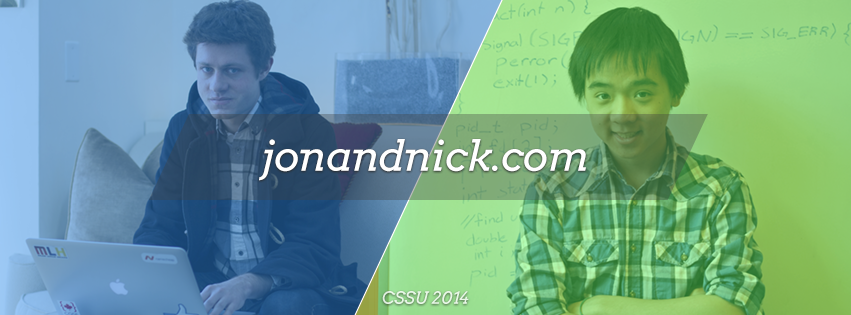
<style>
.page{position:relative;width:851px;height:315px}
.page>*{position:absolute;margin:0}
.t1{font:41.7px "Arvo-Italic";letter-spacing:-0.02em;color:#ffffff}
.t2{font:16.7px "Arvo-Italic";color:#e8f7e6}
</style>
<div class="page">
<p class="t1" style="left:259px;top:139px;width:327px;height:42px">jonandnick.com</p>
<p class="t2" style="left:382px;top:291px;width:87px;height:13px">CSSU 2014</p>
</div>
